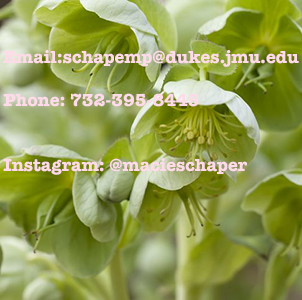
<style>
.page{position:relative;width:302px;height:300px}
.page>*{position:absolute;margin:0}
.t1{font:18px "AmericanTypewriter-Bold";color:#ffdbe9}
</style>
<div class="page">
<p class="t1" style="left:2px;top:50px;width:297px;height:17px">Email:schapemp@dukes.jmu.edu</p>
<p class="t1" style="left:3px;top:93px;width:244px;height:82px">Phone: 732-395-8445<br><br><br>Instagram: @macieschaper</p>
</div>
